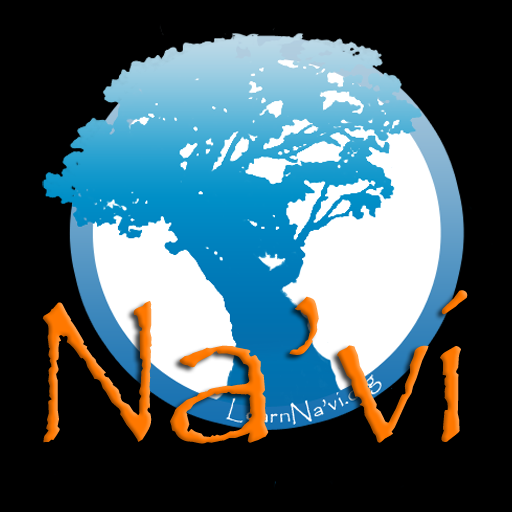
<style>
.page{position:relative;width:512px;height:512px;background:#000000}
.page>*{position:absolute;margin:0}
.t1{font:209.4px "Papyrus"}
</style>
<div class="page">
<p class="t1" style="left:42px;top:290px;width:426px;height:154px">Na’vi</p>
</div>
